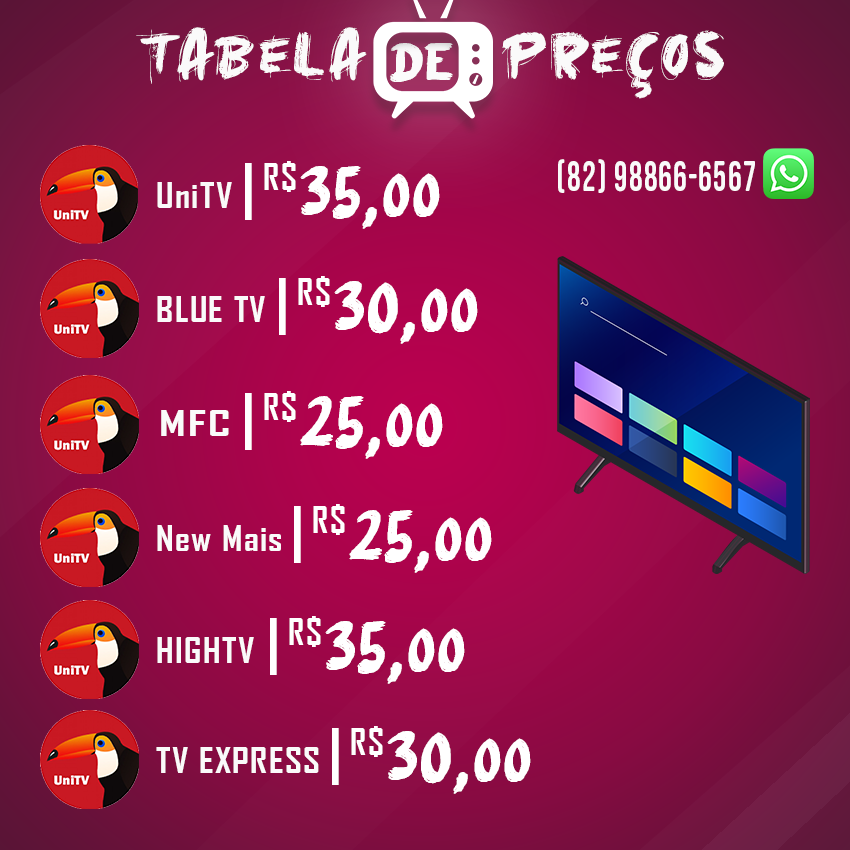
<style>
.page{position:relative;width:850px;height:850px}
.page>*{position:absolute;margin:0}
.t1{font:78.6px "GoldUnderTheMud-Regular";letter-spacing:0.04em;color:#fafafa}
.t2{font:49.3px "aAksiMosi";letter-spacing:0.04em;color:#fafafa}
.t3{font:35.1px "AgencyFB-Bold";letter-spacing:0.04em;color:#ffffff}
.t4{font:42.2px "BebasNeueSemiRounded";letter-spacing:0.04em;color:#fafafa;scale:0.8 1}
.t5{font:59.6px "AgencyFB-Bold";letter-spacing:0.04em;color:#ffffff}
.t6{font:68.7px "aAksiMosi";letter-spacing:0.04em;color:#ffffff;scale:0.83 1}
.t7{font:61px "aAksiMosi";letter-spacing:0.04em;color:#ffffff;scale:0.83 1}
.t8{font:33.6px "AgencyFB-Bold";letter-spacing:0.04em;color:#fafafa;scale:1.1 1}
.t9{font:33.6px "AgencyFB-Bold";letter-spacing:0.04em;color:#fafafa;scale:1.44 1}
</style>
<div class="page">
<p class="t1" style="left:136px;top:27px;width:588px;height:72px">Tabela <span class="t2">de</span>  Preços</p>
<p class="t3" style="left:264px;top:161px;width:32px;height:31px">R$</p>
<p class="t4" style="left:558px;top:159px;width:197px;height:34px">(82) 98866-6567</p>
<p class="t5" style="left:245px;top:163px;width:7px;height:57px">|</p>
<p class="t6" style="left:300px;top:166px;width:140px;height:63px">35,<span class="t7">00</span></p>
<p class="t8" style="left:157px;top:182px;width:75px;height:26px">UniTV</p>
<p class="t5" style="left:279px;top:278px;width:7px;height:57px">|</p>
<p class="t3" style="left:298px;top:276px;width:32px;height:31px">R$</p>
<p class="t6" style="left:334px;top:281px;width:144px;height:63px">30,<span class="t7">00</span></p>
<p class="t8" style="left:157px;top:296px;width:108px;height:26px">BLUE TV</p>
<p class="t5" style="left:245px;top:393px;width:7px;height:57px">|</p>
<p class="t3" style="left:264px;top:391px;width:32px;height:31px">R$</p>
<p class="t6" style="left:300px;top:396px;width:143px;height:63px">25,<span class="t7">00</span></p>
<p class="t9" style="left:161px;top:410px;width:68px;height:26px">MFC</p>
<p class="t5" style="left:294px;top:506px;width:7px;height:57px">|</p>
<p class="t3" style="left:313px;top:504px;width:32px;height:31px">R$</p>
<p class="t6" style="left:349px;top:510px;width:143px;height:63px">25,<span class="t7">00</span></p>
<p class="t8" style="left:157px;top:525px;width:124px;height:26px">New Mais</p>
<p class="t3" style="left:289px;top:616px;width:32px;height:31px">R$</p>
<p class="t5" style="left:270px;top:618px;width:7px;height:57px">|</p>
<p class="t6" style="left:325px;top:621px;width:140px;height:63px">35,<span class="t7">00</span></p>
<p class="t8" style="left:157px;top:637px;width:97px;height:26px">HIGHTV</p>
<p class="t3" style="left:351px;top:726px;width:32px;height:31px">R$</p>
<p class="t5" style="left:332px;top:728px;width:7px;height:57px">|</p>
<p class="t6" style="left:387px;top:731px;width:144px;height:63px">30,<span class="t7">00</span></p>
<p class="t8" style="left:156px;top:747px;width:163px;height:26px">TV EXPRESS</p>
</div>
